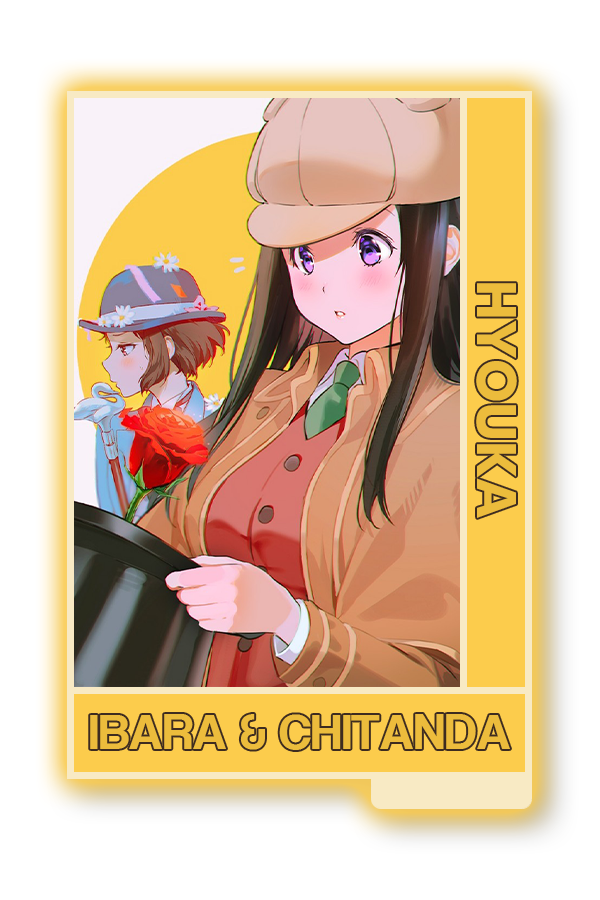
<style>
.page{position:relative;width:600px;height:900px;background:#ffffff}
.page>*{position:absolute;margin:0}
.t1{font:55.7px "MADETOMMY-Bold";color:#ecbc3c}
.t2{font:52.4px "CoolveticaRg-Regular";color:#ecbc3c}
</style>
<div class="page">
<p class="t1" style="left:476px;top:283px;width:41px;height:235px;rotate:90deg">HYOUKA</p>
<p class="t2" style="left:90px;top:714px;width:420px;height:36px">IBARA &amp; CHITANDA</p>
</div>
